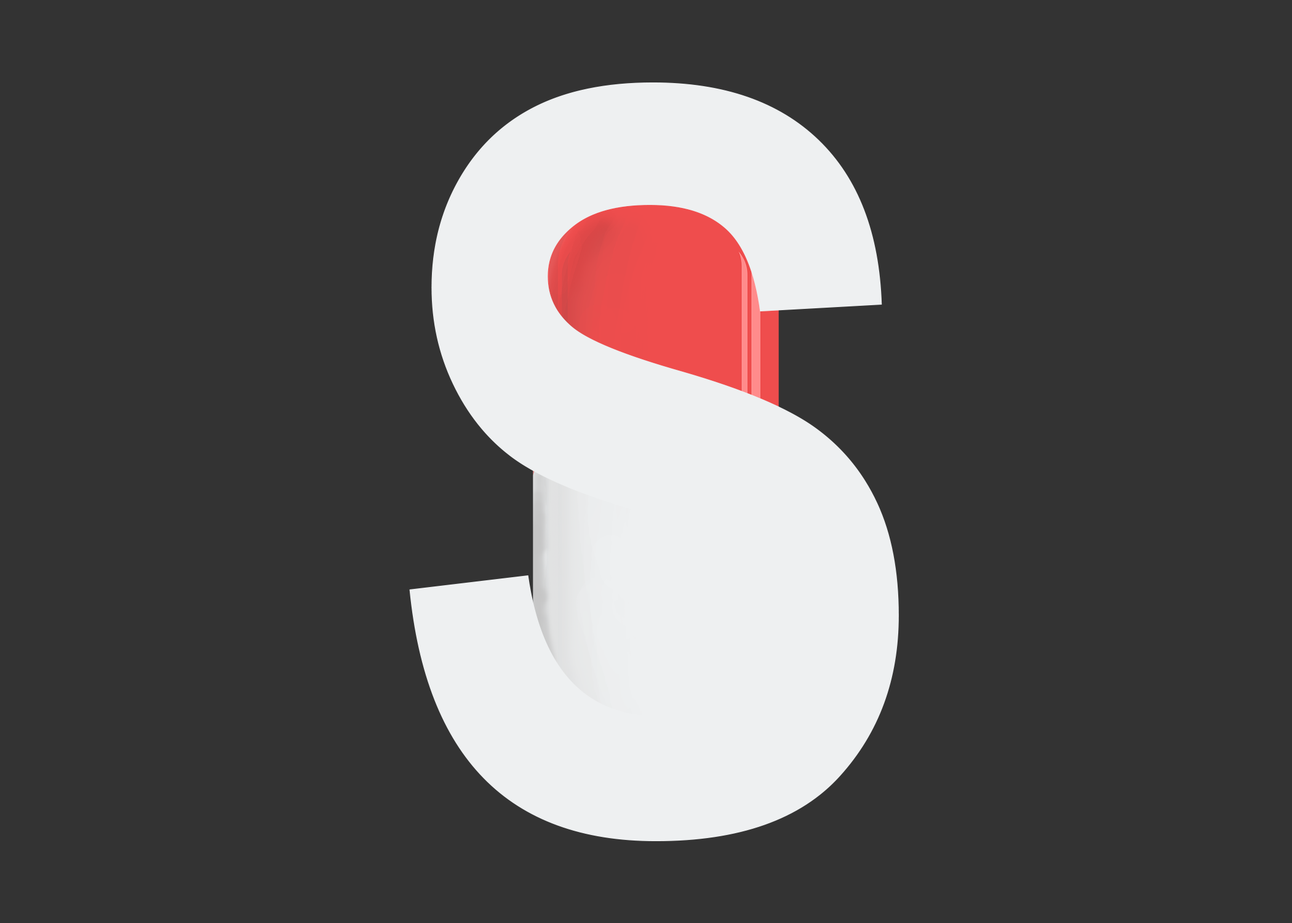
<style>
.page{position:relative;width:1292px;height:923px;background:#333333}
.page>*{position:absolute;margin:0}
.t1{font:1025.4px "ArialNarrow-Bold";color:#eef0f1}
</style>
<div class="page">
<p class="t1" style="left:409px;top:82px;width:490px;height:759px">S</p>
</div>
